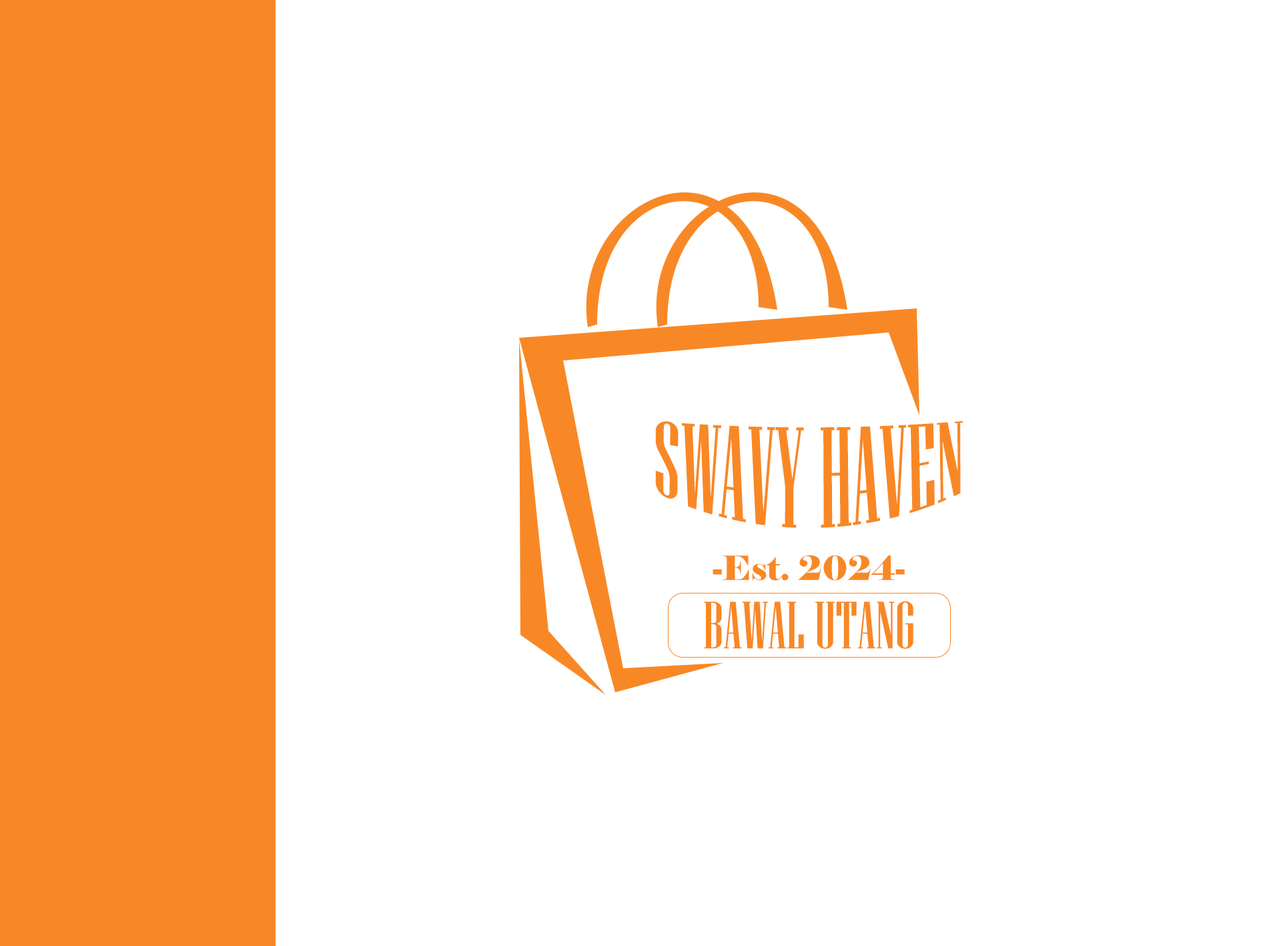
<style>
.page{position:relative;width:1261px;height:946px;background:#ffffff}
.page>*{position:absolute;margin:0}
.t1{font:100.1px "NiagaraSolid-Reg";color:#f88825}
.t2{font:33.4px "Elephant-Regular";color:#f88825}
.t3{font:66.7px "NiagaraSolid-Reg";color:#f88825}
</style>
<div class="page">
<p class="t1" style="left:655px;top:420px;width:309px;height:108px">SWAVY HAVEN</p>
<p class="t2" style="left:713px;top:555px;width:192px;height:26px">-Est. 2024-</p>
<p class="t3" style="left:704px;top:601px;width:209px;height:48px">BAWAL UTANG</p>
</div>
